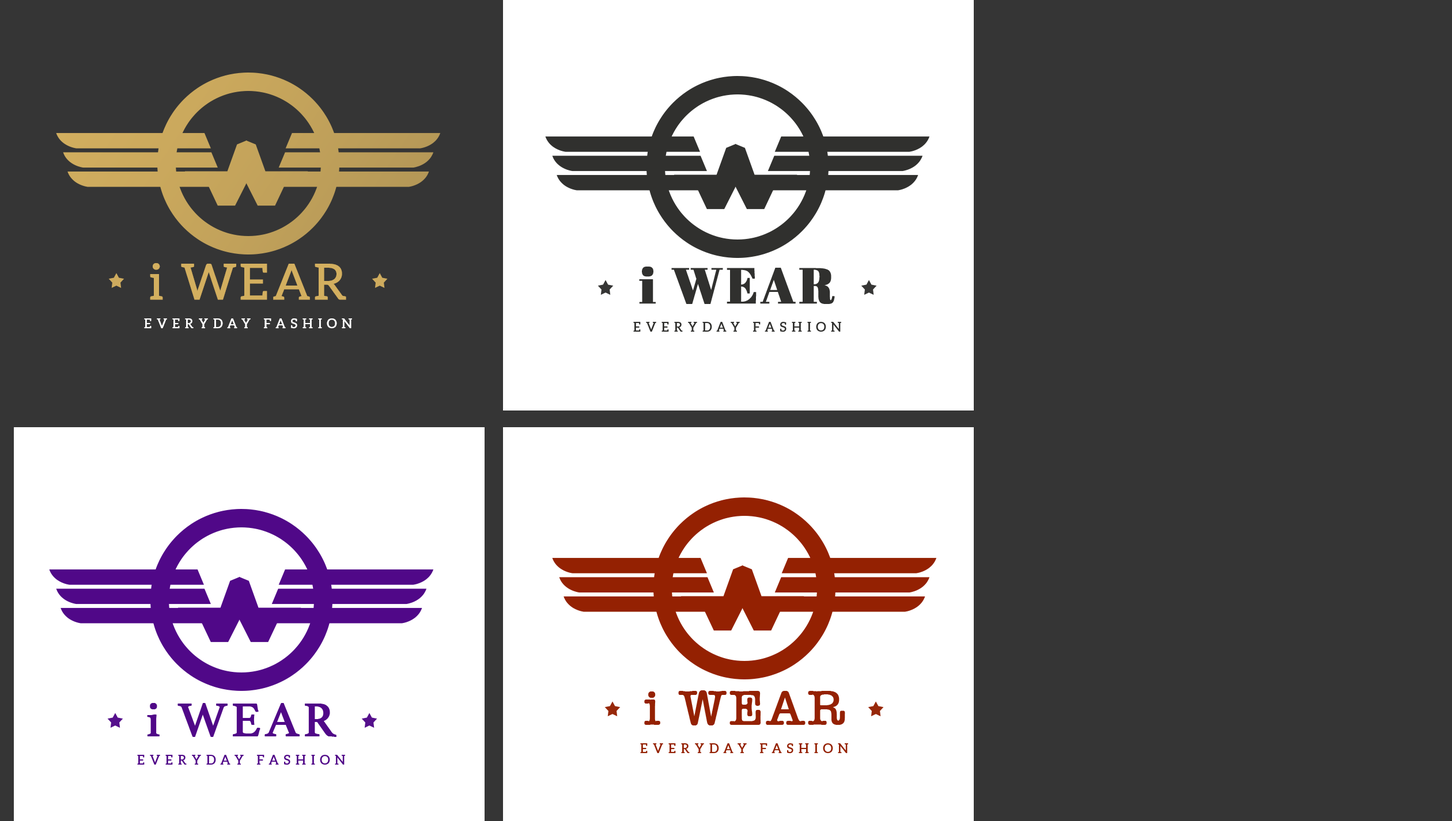
<style>
.page{position:relative;width:1452px;height:821px;background:#353535}
.page>*{position:absolute;margin:0}
.t1{font:49.7px "Aleo-Regular";letter-spacing:0.05em;color:#d3af5f;text-transform:uppercase;font-weight:bold}
.t2{font:49.7px "Aleo-Regular";letter-spacing:0.05em;color:#d3af5f;font-weight:bold}
.t3{font:49.7px "AbrilFatface-Regular";letter-spacing:0.05em;color:#30302e;text-transform:uppercase;font-weight:bold}
.t4{font:49.7px "AbrilFatface-Regular";letter-spacing:0.05em;color:#30302e;font-weight:bold}
.t5{font:13.2px "Aleo-Regular";letter-spacing:0.37em;color:#ffffff;text-transform:uppercase;font-weight:bold}
.t6{font:13.2px "Aleo-Regular";letter-spacing:0.37em;color:#30302e;text-transform:uppercase;font-weight:bold}
.t7{font:49.7px "AmericanTypewriter";letter-spacing:0.05em;color:#942102;text-transform:uppercase;font-weight:bold}
.t8{font:49.7px "AmericanTypewriter";letter-spacing:0.05em;color:#942102;font-weight:bold}
.t9{font:49.7px "Athelas-Regular";letter-spacing:0.05em;color:#500888;text-transform:uppercase;font-weight:bold}
.t10{font:49.7px "Athelas-Regular";letter-spacing:0.05em;color:#500888;font-weight:bold}
.t11{font:13.2px "Aleo-Regular";letter-spacing:0.37em;color:#942102;text-transform:uppercase;font-weight:bold}
.t12{font:13.2px "Aleo-Regular";letter-spacing:0.37em;color:#500888;text-transform:uppercase;font-weight:bold}
</style>
<div class="page">
<p class="t1" style="left:150px;top:263px;width:196px;height:37px"><span class="t2">i</span> Wear</p>
<p class="t3" style="left:639px;top:267px;width:196px;height:37px"><span class="t4">i </span>Wear</p>
<p class="t5" style="left:144px;top:319px;width:208px;height:10px">Everyday Fashion</p>
<p class="t6" style="left:633px;top:322px;width:208px;height:10px">Everyday Fashion</p>
<p class="t7" style="left:644px;top:691px;width:201px;height:35px"><span class="t8">i </span>Wear</p>
<p class="t9" style="left:147px;top:703px;width:189px;height:34px"><span class="t10">i</span> Wear</p>
<p class="t11" style="left:640px;top:744px;width:208px;height:10px">Everyday Fashion</p>
<p class="t12" style="left:137px;top:755px;width:208px;height:11px">Everyday Fashion</p>
</div>
